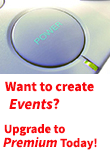
<style>
.page{position:relative;width:110px;height:150px;background:#ffffff}
.page>*{position:absolute;margin:0}
.t1{font:13.9px "SourceSansPro-Bold";color:#f8090e}
.t2{font:15.3px "SourceSansPro-BoldIt";color:#f8090e}
.t3{font:15.3px "SourceSansPro-Bold";color:#f8090e}
.t4{font:12.5px "SourceSansPro-Bold";color:#f8090e}
.t5{font:13.9px "SourceSansPro-BoldIt";color:#f8090e}
</style>
<div class="page">
<p class="t1" style="left:5px;top:81px;width:89px;height:11px">Want to create</p>
<p class="t2" style="left:9px;top:98px;width:51px;height:12px">Events<span class="t3">?</span></p>
<p class="t4" style="left:4px;top:124px;width:61px;height:12px">Upgrade to</p>
<p class="t5" style="left:3px;top:137px;width:94px;height:13px">Premium <span class="t4">Today!</span></p>
</div>
